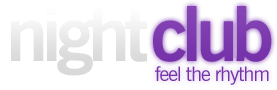
<style>
.page{position:relative;width:277px;height:90px;background:#ffffff}
.page>*{position:absolute;margin:0}
.t1{font:76px "NewsGothicBT-Bold";letter-spacing:-0.075em;color:#e7e7e7}
.t2{font:76px "NewsGothicBT-Bold";letter-spacing:-0.075em;color:#7532a9}
.t3{font:20px "NewsGothicBT-Roman";letter-spacing:-0.05em;color:#7532a9}
</style>
<div class="page">
<p class="t1" style="left:11px;top:5px;width:137px;height:71px">night</p>
<p class="t2" style="left:153px;top:5px;width:119px;height:57px">club</p>
<p class="t3" style="left:155px;top:66px;width:114px;height:19px">feel the rhythm</p>
</div>
